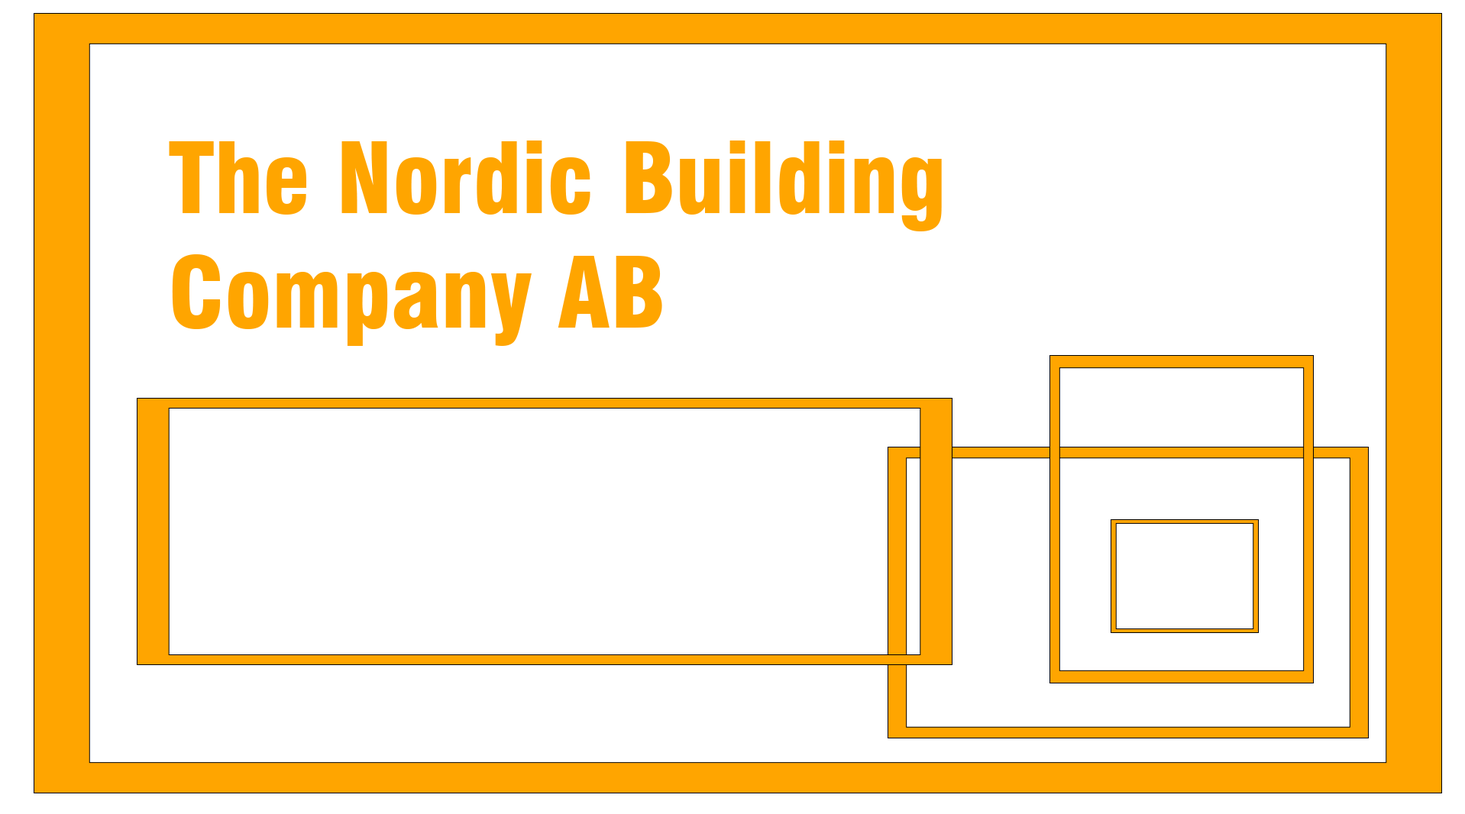
<style>
.page{position:relative;width:1465px;height:814px;background:#ffffff}
.page>*{position:absolute;margin:0}
.t1{font:95.5px "Swiss721BT-BlackCondensed";color:#ffa500}
</style>
<div class="page">
<p class="t1" style="left:169px;top:141px;width:773px;height:205px">The Nordic Building Company AB</p>
</div>
